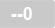
<style>
.page{position:relative;width:55px;height:28px;background:#c9c9c9}
.page>*{position:absolute;margin:0}
.t1{font:18.2px "Arial-BoldMT";color:#ffffff}
</style>
<div class="page">
<p class="t1" style="left:11px;top:7px;width:21px;height:13px">--0</p>
</div>
